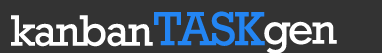
<style>
.page{position:relative;width:382px;height:53px;background:#333333}
.page>*{position:absolute;margin:0}
.t1{font:44.8px "Rockwell";letter-spacing:-0.04em;color:#fefefe}
.t2{font:48.7px "Rockwell";letter-spacing:-0.04em;color:#2385f3}
.t3{font:44.8px "Rockwell";letter-spacing:-0.04em;color:#ffffff}
</style>
<div class="page">
<p class="t1" style="left:11px;top:15px;width:142px;height:32px">kanban</p>
<p class="t2" style="left:154px;top:11px;width:111px;height:35px">TASK</p>
<p class="t3" style="left:264px;top:21px;width:73px;height:33px">gen</p>
</div>
